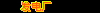
<style>
.page{position:relative;width:100px;height:13px;background:#000000}
.page>*{position:absolute;margin:0}
.t1{font:10px "MicrosoftJhengHeiRegular"}
.t2{font:10px "MicrosoftJhengHeiRegular";color:#ffbf00}
.t3{font:10px "MicrosoftJhengHeiRegular";color:#ff5f00}
</style>
<div class="page">
<p class="t1" style="left:20px;top:2px;width:30px;height:9px">发电厂</p>
<p class="t1" style="left:20px;top:1px;width:30px;height:9px">发电厂</p>
<p class="t1" style="left:21px;top:1px;width:30px;height:9px">发电厂</p>
<p class="t2" style="left:21px;top:3px;width:30px;height:9px">发电厂</p>
<p class="t3" style="left:21px;top:2px;width:30px;height:9px">发电厂</p>
<p class="t1" style="left:22px;top:2px;width:30px;height:9px">发电厂</p>
<p class="t2" style="left:22px;top:3px;width:30px;height:9px">发电厂</p>
</div>
